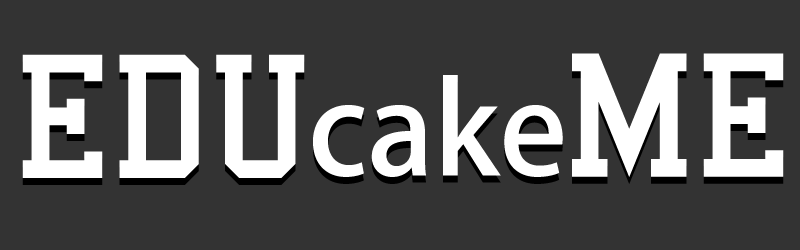
<style>
.page{position:relative;width:800px;height:250px;background:#333333}
.page>*{position:absolute;margin:0}
.t1{font:180px "College";color:#ffffff}
.t2{font:125px "AdobeHeitiStd-Regular";color:#ffffff}
</style>
<div class="page">
<p class="t1" style="left:22px;top:54px;width:283px;height:124px">EDU</p>
<p class="t1" style="left:572px;top:53px;width:212px;height:124px">ME</p>
<p class="t2" style="left:313px;top:75px;width:250px;height:102px">cake</p>
</div>
